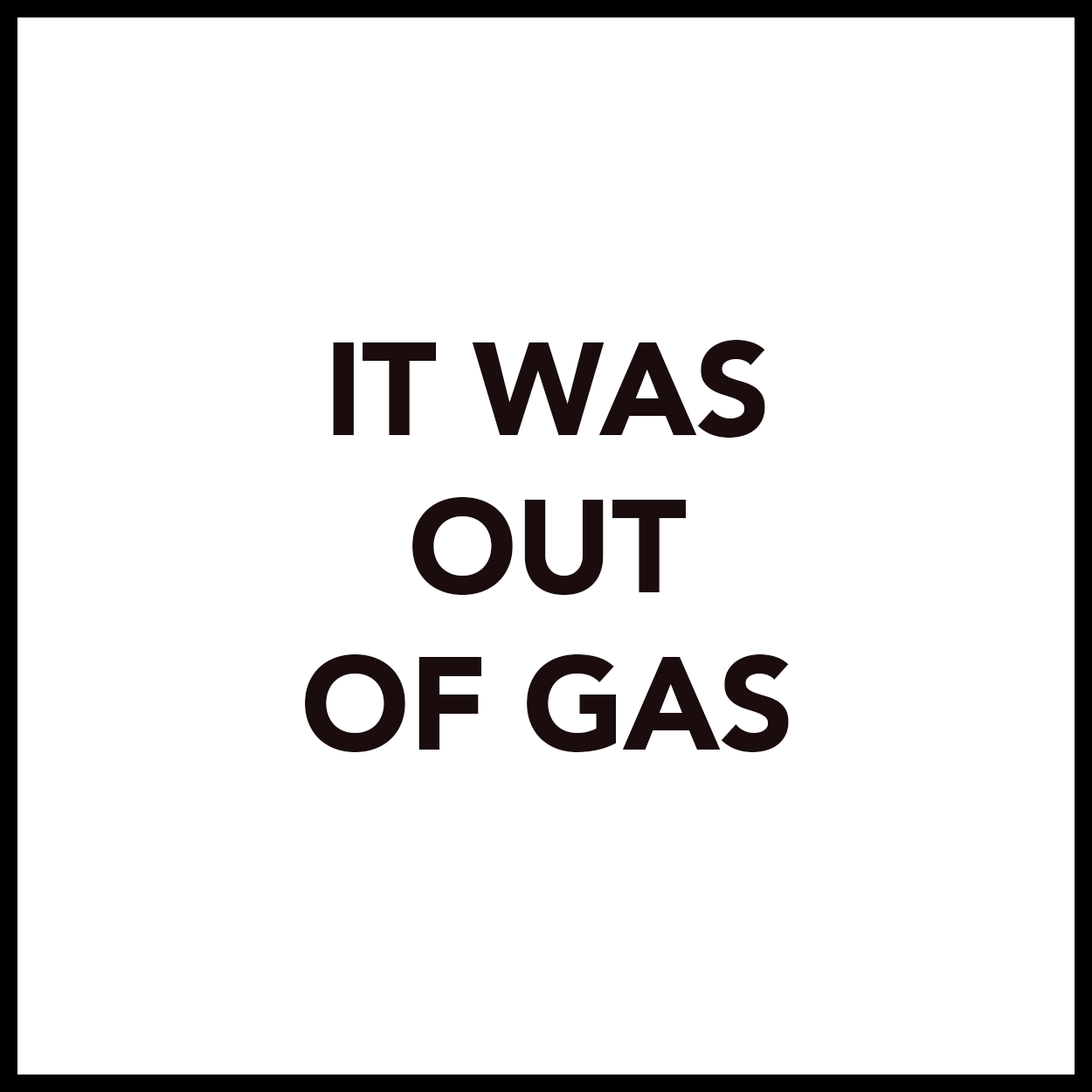
<style>
.page{position:relative;width:1092px;height:1092px;background:#ffffff}
.page>*{position:absolute;margin:0}
.t1{font:131px "Avenir-Black";letter-spacing:-0.01em;color:#1b0d0d}
</style>
<div class="page">
<p class="t1" style="left:305px;top:340px;width:484px;height:412px;text-align:center">IT WAS<br>OUT<br>OF GAS</p>
</div>
